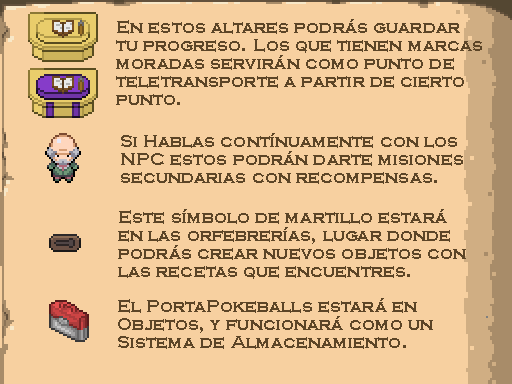
<style>
.page{position:relative;width:512px;height:384px;background:#f7d0a0}
.page>*{position:absolute;margin:0}
.t1{font:18px/18px "CopperplateGothic-Bold";letter-spacing:0.004em;color:#5c4527}
.t2{font:18px/12px "CopperplateGothic-Bold";letter-spacing:0.004em;color:#5c4527}
</style>
<div class="page">
<p class="t1" style="left:116px;top:19px;width:366px;height:86px"><span class="t2">En estos altares podrás guardar<br></span>tu progreso. Los que tienen marcas<br>moradas servirán como punto de<br>teletransporte a partir de cierto<br>punto.</p>
<p class="t1" style="left:121px;top:133px;width:342px;height:51px">Si Hablas contínuamente con los<br>NPC estos podrán darte misiones<br>secundarias con recompensas.</p>
<p class="t1" style="left:118px;top:209px;width:348px;height:70px">Este símbolo de martillo estará<br>en las orfebrerías, lugar donde <br>podrás crear nuevos objetos con<br>las recetas que encuentres.</p>
<p class="t1" style="left:118px;top:298px;width:315px;height:51px">El PortaPokeballs estará en <br>Objetos, y funcionará como un<br>Sistema de Almacenamiento.</p>
</div>
